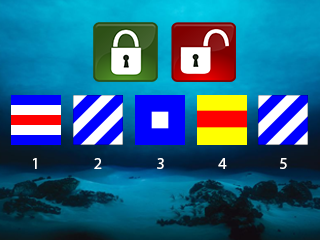
<style>
.page{position:relative;width:320px;height:240px}
.page>*{position:absolute;margin:0}
.t1{font:16px "MyriadPro-Regular";color:#ffffff}
</style>
<div class="page">
<p class="t1" style="left:33px;top:158px;width:4px;height:11px">1</p>
<p class="t1" style="left:94px;top:158px;width:8px;height:11px">2</p>
<p class="t1" style="left:157px;top:158px;width:7px;height:11px">3</p>
<p class="t1" style="left:218px;top:158px;width:9px;height:11px">4</p>
<p class="t1" style="left:280px;top:158px;width:7px;height:11px">5</p>
</div>
